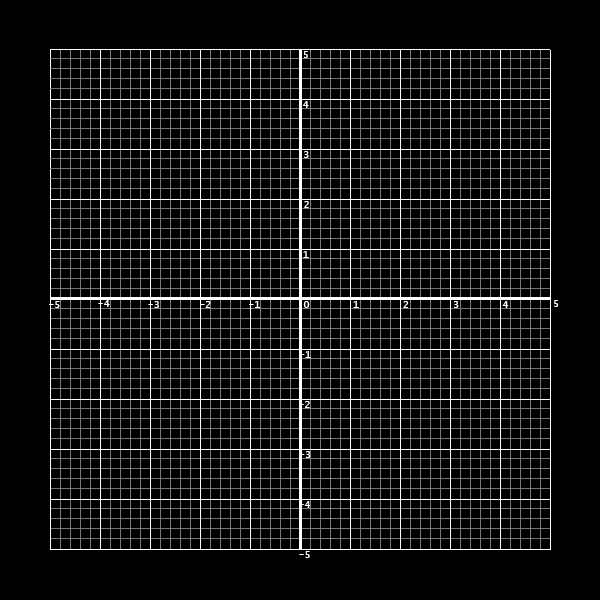
<style>
.page{position:relative;width:600px;height:600px;background:#000000}
.page>*{position:absolute;margin:0}
.t1{font:10px "LucidaConsole";color:#ffffff}
</style>
<div class="page">
<p class="t1" style="left:304px;top:51px;width:4px;height:7px">5</p>
<p class="t1" style="left:303px;top:101px;width:6px;height:7px">4</p>
<p class="t1" style="left:304px;top:151px;width:5px;height:7px">3</p>
<p class="t1" style="left:304px;top:201px;width:5px;height:7px">2</p>
<p class="t1" style="left:303px;top:251px;width:6px;height:7px">1</p>
<p class="t1" style="left:49px;top:301px;width:11px;height:7px">-5</p>
<p class="t1" style="left:98px;top:300px;width:12px;height:7px">-4</p>
<p class="t1" style="left:148px;top:301px;width:11px;height:7px">-3</p>
<p class="t1" style="left:200px;top:301px;width:11px;height:7px">-2</p>
<p class="t1" style="left:249px;top:301px;width:12px;height:7px">-1</p>
<p class="t1" style="left:303px;top:301px;width:7px;height:7px">0</p>
<p class="t1" style="left:353px;top:301px;width:6px;height:7px">1</p>
<p class="t1" style="left:403px;top:301px;width:6px;height:7px">2</p>
<p class="t1" style="left:454px;top:301px;width:5px;height:7px">3</p>
<p class="t1" style="left:502px;top:301px;width:7px;height:7px">4</p>
<p class="t1" style="left:554px;top:300px;width:5px;height:7px">5</p>
<p class="t1" style="left:299px;top:351px;width:12px;height:7px">-1</p>
<p class="t1" style="left:299px;top:401px;width:11px;height:7px">-2</p>
<p class="t1" style="left:299px;top:451px;width:12px;height:7px">-3</p>
<p class="t1" style="left:299px;top:501px;width:12px;height:7px">-4</p>
<p class="t1" style="left:299px;top:551px;width:11px;height:7px">-5</p>
</div>
